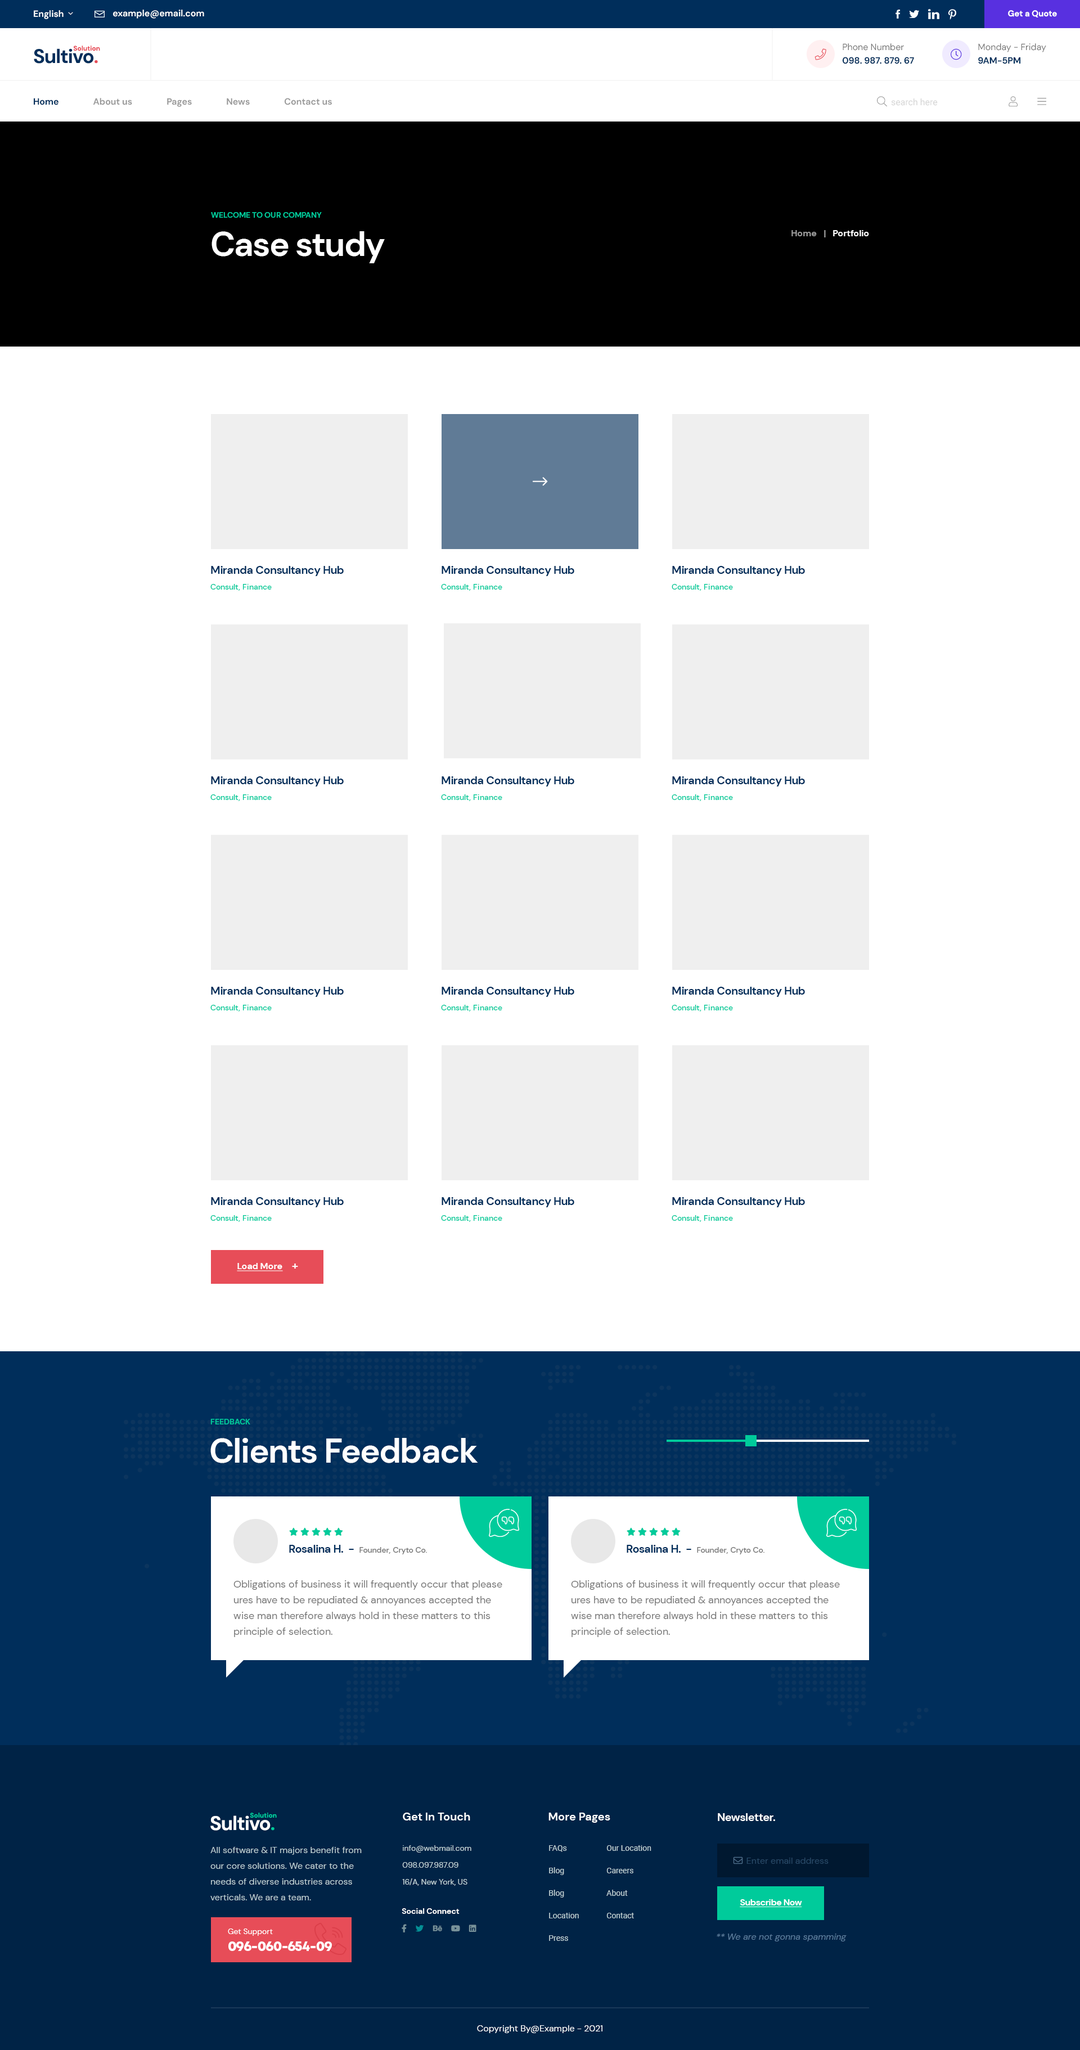
<style>
.page{position:relative;width:1080px;height:2050px;background:#ffffff}
.page>*{position:absolute;margin:0}
.t1{font:9px "DMSans-Bold";color:#ffffff}
.t2{font:8.4px "DMSans-Bold";color:#ffffff}
.t3{font:19.7px "DMSans-Bold";letter-spacing:-0.03em;color:#002e5b}
.t4{font:19.7px "DMSans-Bold";letter-spacing:-0.03em;color:#e74d58}
.t5{font:6.8px "DMSans-Bold";color:#e74d58}
.t6{font:9px/13.5px "DMSans-Bold";color:#002e5b}
.t7{font:9px/13.5px "DMSans-Regular";color:#777777}
.t8{font:9px "DMSans-Bold";color:#999999}
.t9{font:9px "DMSans-Bold";color:#002e5b}
.t10{font:7.9px "DMSans-Bold";color:#00cb9b;text-transform:uppercase}
.t11{font:33.8px "DMSans-Bold";letter-spacing:-0.03em;color:#ffffff}
.t12{font:11.2px "DMSans-Bold";letter-spacing:-0.03em;color:#002e5b}
.t13{font:7.9px "DMSans-Medium";color:#00cb9b}
.t14{font:9px "DMSans-Bold";color:#ffffff;text-decoration:underline}
.t15{font:11.2px "DMSans-Bold";color:#ffffff}
.t16{font:7.9px "DMSans-Medium";color:#777777}
.t17{font:10.1px/15.8px "DMSans-Regular";color:#777777}
.t18{font:19.7px "DMSans-Bold";letter-spacing:-0.03em;color:#ffffff}
.t19{font:19.7px "DMSans-Bold";letter-spacing:-0.03em;color:#00cb9b}
.t20{font:6.8px "DMSans-Bold";color:#00cb9b}
.t21{font:11.2px "DMSans-Bold";letter-spacing:-0.03em;color:#ffffff}
.t22{font:9px/15.8px "DMSans-Regular";color:#bdced3}
.t23{font:7.9px/16.9px "DMSans-Regular";color:#bdced3}
.t24{font:7.9px/22.5px "Roboto-Regular";color:#bdced3}
.t25{font:9px "DMSans-Regular";color:#294866}
.t26{font:9px "FontAwesome5Pro-Light";color:#52708e}
.t27{font:9px "DMSans-Bold";letter-spacing:-0.03em;color:#ffffff;text-decoration:underline}
.t28{font:7.9px "DMSans-Bold";color:#ffffff}
.t29{font:13.5px/16.9px "Mont-HeavyDEMO";letter-spacing:-0.03em;color:#ffffff}
.t30{font:7.9px/16.9px "DMSans-Regular";color:#ffffff}
.t31{font:9px "DMSans-Italic";color:#5c7d9d}
.t32{font:9px "DMSans-Regular";color:#ffffff}
</style>
<div class="page">
<p class="t1" style="left:113px;top:10px;width:91px;height:9px">example@email.com</p>
<p class="t2" style="left:1008px;top:10px;width:49px;height:7px">Get a Quote</p>
<p class="t3" style="left:34px;top:48px;width:64px;height:16px">Sultivo<span class="t4">.</span></p>
<p class="t5" style="left:73px;top:46px;width:27px;height:5px">Solution</p>
<p class="t6" style="left:843px;top:43px;width:71px;height:21px"><span class="t7">Phone Number<br></span>098. 987. 879. 67</p>
<p class="t7" style="left:978px;top:43px;width:68px;height:21px">Monday - Friday<br><span class="t6">9AM-5PM</span></p>
<p class="t8" style="left:34px;top:98px;width:298px;height:9px"><span class="t9">Home                </span>About us                Pages                News                Contact us</p>
<p class="t10" style="left:211px;top:212px;width:111px;height:6px">welcome to our company</p>
<p class="t11" style="left:212px;top:231px;width:173px;height:32px">Case study</p>
<p class="t1" style="left:791px;top:230px;width:78px;height:7px"><span class="t8">Home   |   </span>Portfolio</p>
<p class="t12" style="left:211px;top:566px;width:133px;height:10px">Miranda Consultancy Hub</p>
<p class="t12" style="left:442px;top:566px;width:132px;height:10px">Miranda Consultancy Hub</p>
<p class="t12" style="left:672px;top:566px;width:133px;height:10px">Miranda Consultancy Hub</p>
<p class="t13" style="left:210px;top:584px;width:62px;height:7px">Consult, Finance</p>
<p class="t13" style="left:441px;top:584px;width:61px;height:7px">Consult, Finance</p>
<p class="t13" style="left:672px;top:584px;width:61px;height:7px">Consult, Finance</p>
<p class="t12" style="left:211px;top:776px;width:133px;height:10px">Miranda Consultancy Hub</p>
<p class="t12" style="left:442px;top:776px;width:132px;height:10px">Miranda Consultancy Hub</p>
<p class="t12" style="left:672px;top:776px;width:133px;height:10px">Miranda Consultancy Hub</p>
<p class="t13" style="left:210px;top:794px;width:62px;height:7px">Consult, Finance</p>
<p class="t13" style="left:441px;top:794px;width:61px;height:7px">Consult, Finance</p>
<p class="t13" style="left:672px;top:794px;width:61px;height:7px">Consult, Finance</p>
<p class="t12" style="left:211px;top:987px;width:133px;height:10px">Miranda Consultancy Hub</p>
<p class="t12" style="left:442px;top:987px;width:132px;height:10px">Miranda Consultancy Hub</p>
<p class="t12" style="left:672px;top:987px;width:133px;height:10px">Miranda Consultancy Hub</p>
<p class="t13" style="left:210px;top:1005px;width:62px;height:6px">Consult, Finance</p>
<p class="t13" style="left:441px;top:1005px;width:61px;height:6px">Consult, Finance</p>
<p class="t13" style="left:672px;top:1005px;width:61px;height:6px">Consult, Finance</p>
<p class="t12" style="left:211px;top:1197px;width:133px;height:10px">Miranda Consultancy Hub</p>
<p class="t12" style="left:442px;top:1197px;width:132px;height:10px">Miranda Consultancy Hub</p>
<p class="t12" style="left:672px;top:1197px;width:133px;height:10px">Miranda Consultancy Hub</p>
<p class="t13" style="left:210px;top:1215px;width:62px;height:7px">Consult, Finance</p>
<p class="t13" style="left:441px;top:1215px;width:61px;height:7px">Consult, Finance</p>
<p class="t13" style="left:672px;top:1215px;width:61px;height:7px">Consult, Finance</p>
<p class="t14" style="left:237px;top:1263px;width:61px;height:8px">Load More    <span class="t15">+</span></p>
<p class="t10" style="left:210px;top:1419px;width:40px;height:5px">feedback</p>
<p class="t11" style="left:210px;top:1438px;width:268px;height:25px">Clients Feedback</p>
<p class="t16" style="left:289px;top:1545px;width:138px;height:9px"><span class="t12">Rosalina H.  -  </span>Founder, Cryto Co.</p>
<p class="t16" style="left:627px;top:1545px;width:137px;height:9px"><span class="t12">Rosalina H.  -  </span>Founder, Cryto Co.</p>
<p class="t17" style="left:233px;top:1580px;width:269px;height:57px">Obligations of business it will frequently occur that please ures have to be repudiated &amp; annoyances accepted the wise man therefore always hold in these matters to this principle of selection.</p>
<p class="t17" style="left:571px;top:1580px;width:269px;height:57px">Obligations of business it will frequently occur that please ures have to be repudiated &amp; annoyances accepted the wise man therefore always hold in these matters to this principle of selection.</p>
<p class="t18" style="left:210px;top:1815px;width:64px;height:15px">Sultivo<span class="t19">.</span></p>
<p class="t20" style="left:250px;top:1812px;width:27px;height:6px">Solution</p>
<p class="t15" style="left:403px;top:1812px;width:67px;height:8px">Get In Touch</p>
<p class="t15" style="left:548px;top:1812px;width:62px;height:10px">More Pages</p>
<p class="t21" style="left:718px;top:1813px;width:57px;height:8px">Newsletter.</p>
<p class="t22" style="left:210px;top:1847px;width:152px;height:53px">All software &amp; IT majors benefit from<br>our core solutions. We cater to the<br>needs of diverse industries across<br>verticals. We are a team.</p>
<p class="t23" style="left:402px;top:1845px;width:69px;height:41px">info@webmail.com<br>098.097.987.09<br>16/A, New York, US</p>
<p class="t24" style="left:549px;top:1845px;width:30px;height:96px">FAQs<br>Blog<br>Blog<br>Location<br>Press</p>
<p class="t24" style="left:606px;top:1845px;width:45px;height:73px">Our Location<br>Careers<br>About<br>Contact</p>
<p class="t25" style="left:733px;top:1856px;width:96px;height:8px"><span class="t26">envelope </span>Enter email address</p>
<p class="t27" style="left:740px;top:1899px;width:62px;height:8px">Subscribe Now</p>
<p class="t28" style="left:402px;top:1908px;width:58px;height:6px">Social Connect</p>
<p class="t29" style="left:228px;top:1928px;width:104px;height:23px"><span class="t30">Get Support<br></span>096-060-654-09</p>
<p class="t31" style="left:717px;top:1933px;width:130px;height:8px">** We are not gonna spamming</p>
<p class="t32" style="left:477px;top:2025px;width:125px;height:8px">Copyright By@Example - 2021</p>
</div>
